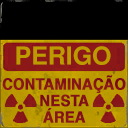
<style>
.page{position:relative;width:128px;height:128px;background:#000000}
.page>*{position:absolute;margin:0}
.t1{font:24.8px "Helvetica-Narrow-Bold";color:#bd9a00;scale:1.23 1}
.t2{font:15.6px/16.5px "Helvetica-Bold";color:#8c1818;text-transform:uppercase;font-weight:bold;scale:0.92 1}
</style>
<div class="page">
<p class="t1" style="left:16px;top:46px;width:95px;height:19px">PERIGO</p>
<p class="t2" style="left:2px;top:75px;width:124px;height:48px;text-align:center">CONTAMINAÇÃO<br>nesta<br>Área</p>
</div>
